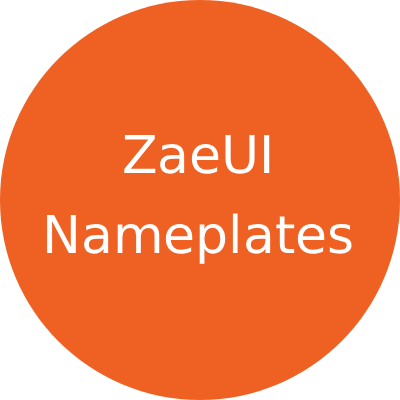
<style>
.page{position:relative;width:400px;height:400px;background:#ef6122}
.page>*{position:absolute;margin:0}
.t1{font:52px "DejaVuSans";color:#ffffff}
</style>
<div class="page">
<p class="t1" style="left:47px;top:135px;width:305px;height:129px;text-align:center">ZaeUI<br><br>Nameplates</p>
</div>
